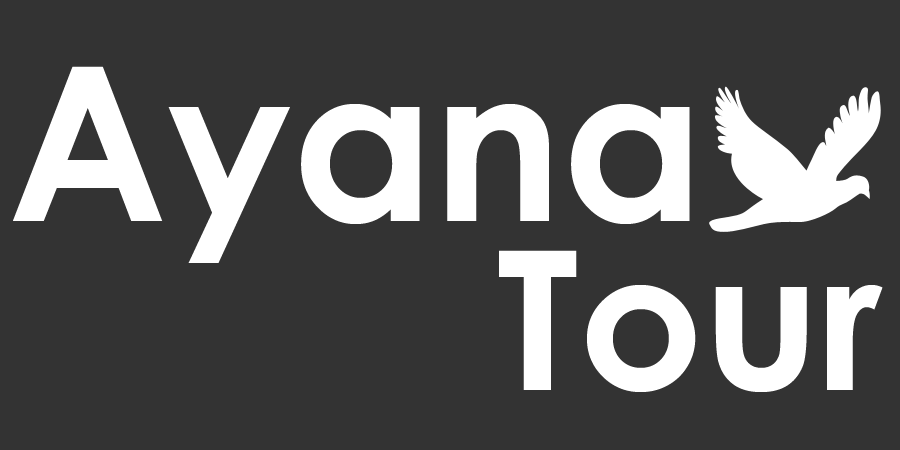
<style>
.page{position:relative;width:900px;height:450px;background:#333333}
.page>*{position:absolute;margin:0}
.t1{font:214.5px "CenturyGothic-Bold";color:#ffffff}
.t2{font:194.1px "CenturyGothic-Bold";color:#ffffff}
</style>
<div class="page">
<p class="t1" style="left:13px;top:66px;width:677px;height:197px">Ayana</p>
<p class="t2" style="left:499px;top:250px;width:384px;height:142px">Tour</p>
</div>
